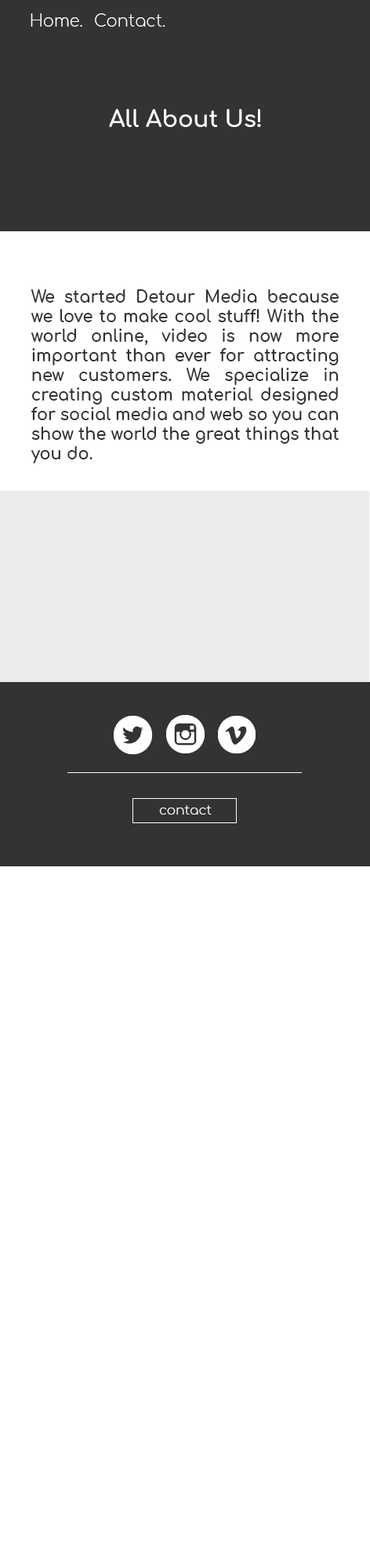
<style>
.page{position:relative;width:370px;height:1568px;background:#ffffff}
.page>*{position:absolute;margin:0}
.t1{font:16.3px "Comfortaa-Light";color:#ffffff}
.t2{font:22.9px "Comfortaa-Bold";color:#ffffff}
.t3{font:16.3px "Comfortaa-Bold";color:#333333}
.t4{font:13.1px "Comfortaa-Light";color:#ffffff}
</style>
<div class="page">
<p class="t1" style="left:31px;top:13px;width:51px;height:14px">Home.</p>
<p class="t1" style="left:95px;top:13px;width:70px;height:14px">Contact.</p>
<p class="t2" style="left:109px;top:109px;width:152px;height:18px">All About Us!</p>
<p class="t3" style="left:31px;top:289px;width:308px;height:174px;text-align:justify">We started Detour Media because we love to make cool stuff! With the world online, video is now more important than ever for attracting new customers. We specialize in creating custom material designed for social media and web so you can show the world the great things that you do.</p>
<p class="t4" style="left:159px;top:805px;width:53px;height:10px">contact</p>
</div>
